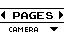
<style>
.page{position:relative;width:64px;height:32px;background:#ffffff}
.page>*{position:absolute;margin:0}
.t1{font:14px "ArcadeClassic";color:#000000;scale:1.05 1}
.t2{font:8px "04b03";color:#000000;scale:1.06 1}
</style>
<div class="page">
<p class="t1" style="left:13px;top:12px;width:40px;height:7px">PAGES</p>
<p class="t2" style="left:9px;top:27px;width:29px;height:5px">CAMERA</p>
</div>
